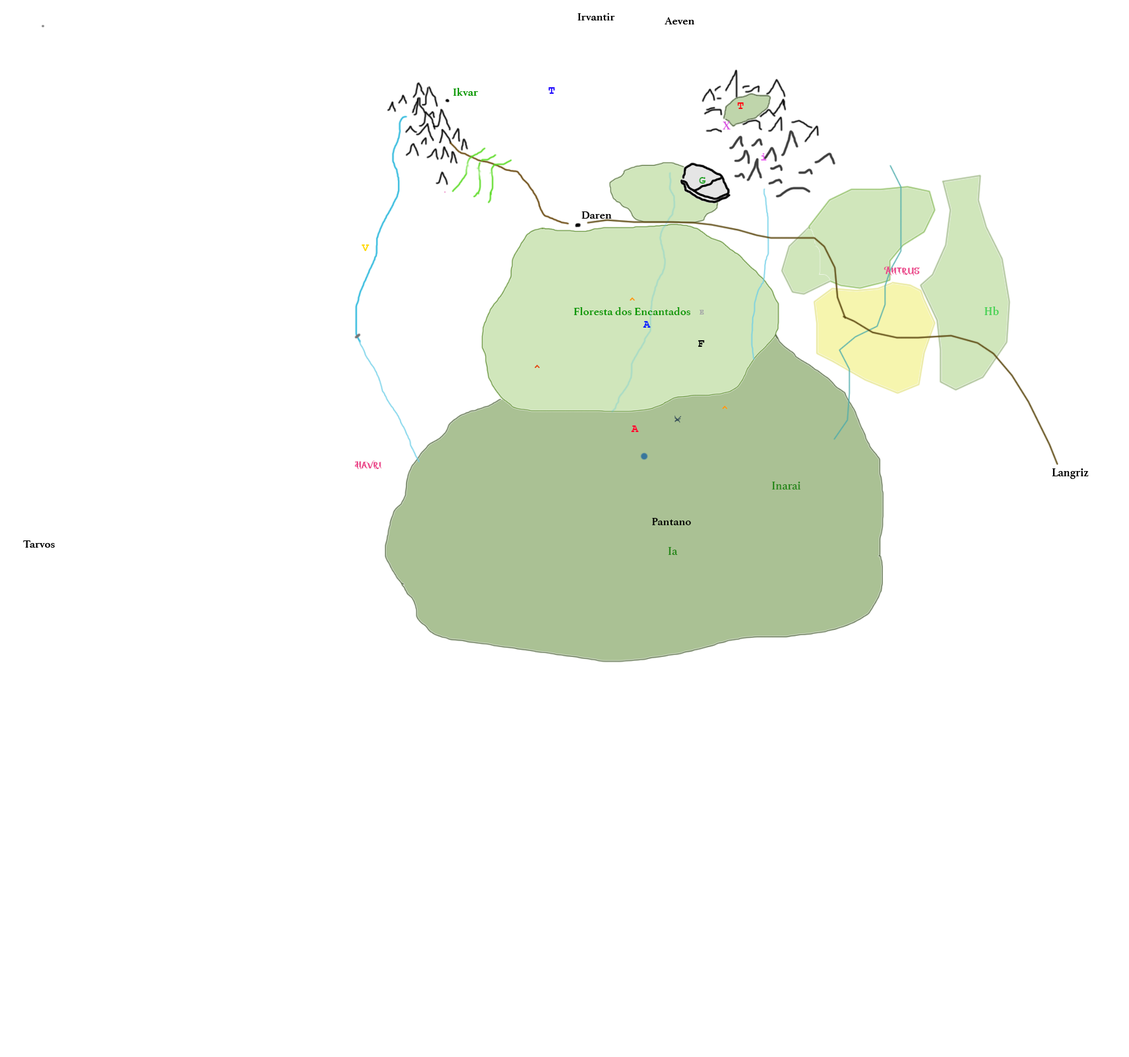
<style>
.page{position:relative;width:1129px;height:1057px;background:#ffffff}
.page>*{position:absolute;margin:0}
.t1{font:11.2px "Athelas-Bold";color:#000000}
.t2{font:11.2px "Athelas-Bold";color:#089700}
.t3{font:11.2px "CourierNewPS-BoldMT";color:#1f08ff}
.t4{font:11.2px "CourierNewPS-BoldMT";color:#ff0814}
.t5{font:11.2px "Athelas-Bold";color:#d95ae2}
.t6{font:11.2px "CourierNewPS-BoldMT";color:#eb66f0}
.t7{font:11.2px "CourierNewPS-BoldMT";color:#28a52b}
.t8{font:11.2px "CourierNewPS-BoldMT";color:#ffd908}
.t9{font:11.2px "ViresGollem";color:#ea4889}
.t10{font:11.2px "CourierNewPS-BoldMT";color:#ff9908}
.t11{font:7.5px "CourierNewPS-BoldMT";color:#a4a5a7}
.t12{font:11.2px "Athelas-Bold";color:#47d255}
.t13{font:11.2px "CourierNewPS-BoldMT";color:#0820ff}
.t14{font:11.2px "CourierNewPS-BoldMT";color:#010407}
.t15{font:11.2px "CourierNewPS-BoldMT";color:#e24405}
.t16{font:11.2px "CourierNewPS-BoldMT";color:#ff0831}
.t17{font:11.2px "Athelas-Bold";color:#29891c}
</style>
<div class="page">
<p class="t1" style="left:577px;top:13px;width:38px;height:7px">Irvantir</p>
<p class="t1" style="left:664px;top:17px;width:30px;height:7px">Aeven</p>
<p class="t2" style="left:453px;top:88px;width:25px;height:8px">Ikvar</p>
<p class="t3" style="left:548px;top:87px;width:7px;height:7px">T</p>
<p class="t4" style="left:737px;top:102px;width:7px;height:7px">T</p>
<p class="t5" style="left:722px;top:122px;width:8px;height:7px">X</p>
<p class="t6" style="left:761px;top:153px;width:6px;height:7px">i</p>
<p class="t7" style="left:699px;top:177px;width:7px;height:7px">G</p>
<p class="t1" style="left:581px;top:211px;width:31px;height:8px">Daren</p>
<p class="t8" style="left:361px;top:244px;width:8px;height:7px">V</p>
<p class="t9" style="left:884px;top:266px;width:35px;height:9px">Antrus</p>
<p class="t10" style="left:629px;top:297px;width:6px;height:3px">^</p>
<p class="t2" style="left:573px;top:307px;width:117px;height:8px">Floresta dos Encantados</p>
<p class="t11" style="left:699px;top:310px;width:5px;height:4px">E</p>
<p class="t12" style="left:984px;top:306px;width:14px;height:9px">Hb</p>
<p class="t13" style="left:643px;top:321px;width:7px;height:7px">A</p>
<p class="t14" style="left:697px;top:340px;width:8px;height:7px">F</p>
<p class="t15" style="left:534px;top:365px;width:6px;height:3px">^</p>
<p class="t10" style="left:722px;top:405px;width:5px;height:4px">^</p>
<p class="t16" style="left:631px;top:425px;width:8px;height:7px">A</p>
<p class="t9" style="left:355px;top:460px;width:27px;height:9px">Havri</p>
<p class="t1" style="left:1051px;top:468px;width:37px;height:11px">Langriz</p>
<p class="t17" style="left:771px;top:481px;width:29px;height:8px">Inarai</p>
<p class="t1" style="left:651px;top:518px;width:40px;height:7px">Pantano</p>
<p class="t1" style="left:23px;top:540px;width:32px;height:7px">Tarvos</p>
<p class="t17" style="left:668px;top:547px;width:10px;height:8px">Ia</p>
</div>
